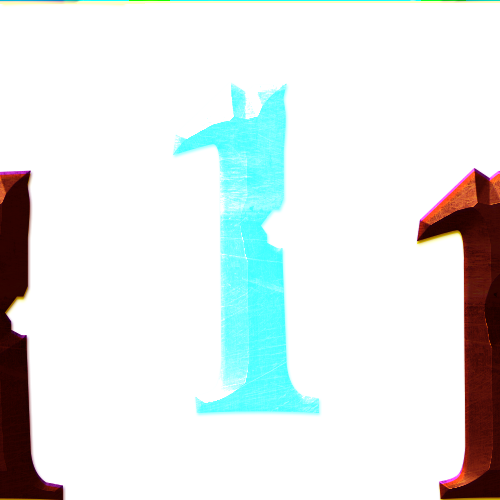
<style>
.page{position:relative;width:500px;height:500px;background:#ffffff}
.page>*{position:absolute;margin:0}
.t1{font:500px "PiecesofEight"}
</style>
<div class="page">
<p class="t1" style="left:173px;top:81px;width:146px;height:331px">1</p>
</div>
